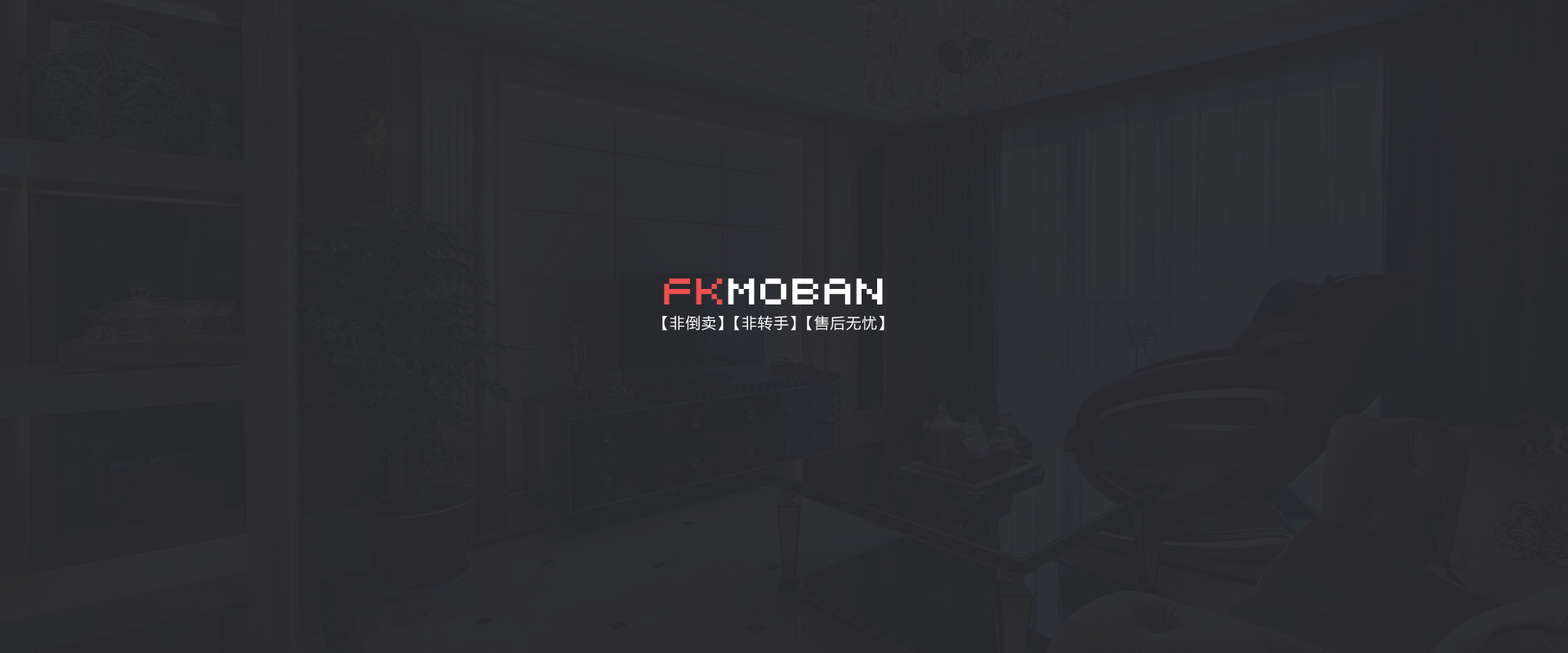
<style>
.page{position:relative;width:1568px;height:653px}
.page>*{position:absolute;margin:0}
.t1{font:31px "04b21";letter-spacing:0.1em;color:#ffffff}
.t2{font:31px "04b21";letter-spacing:0.1em;color:#ed4f4f}
.t3{font:14.7px "MicrosoftYaHei";letter-spacing:0.1em;color:#ffffff}
</style>
<div class="page">
<p class="t1" style="left:664px;top:278px;width:219px;height:27px"><span class="t2">FK</span>MOBAN</p>
<p class="t3" style="left:662px;top:315px;width:222px;height:16px">【非倒卖】【非转手】【售后无忧】</p>
</div>
